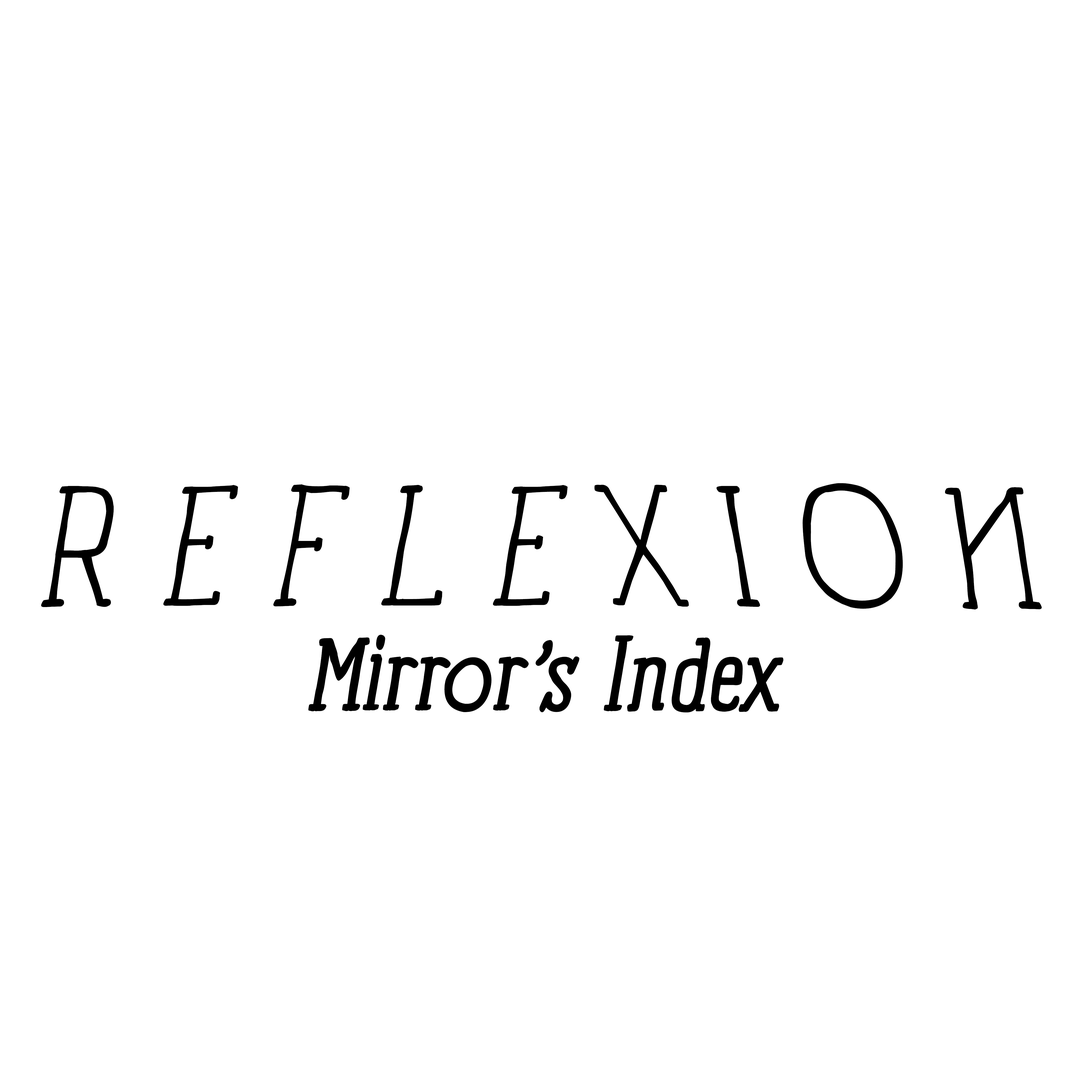
<style>
.page{position:relative;width:1092px;height:1092px;background:#ffffff}
.page>*{position:absolute;margin:0}
.t1{font:166.6px "PanforteSerif-Light";color:#000000;font-style:italic}
.t2{font:100px "PanforteSerif-Regular";color:#000000;font-style:italic}
</style>
<div class="page">
<p class="t1" style="left:41px;top:484px;width:527px;height:123px">R E F L E</p>
<p class="t1" style="left:594px;top:485px;width:95px;height:122px;rotate:180deg">X</p>
<p class="t1" style="left:716px;top:486px;width:44px;height:121px;rotate:180deg">I</p>
<p class="t1" style="left:802px;top:483px;width:101px;height:126px;rotate:180deg">O</p>
<p class="t1" style="left:945px;top:487px;width:97px;height:122px;rotate:180deg">N</p>
<p class="t2" style="left:308px;top:635px;width:476px;height:78px">Mirror’s Index</p>
</div>
